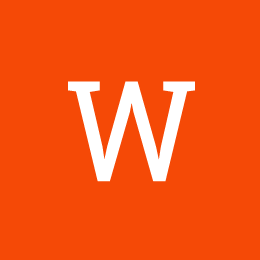
<style>
.page{position:relative;width:260px;height:260px;background:#f54906}
.page>*{position:absolute;margin:0}
.t1{font:140px "RobotoSlab-Regular";color:#ffffff}
</style>
<div class="page">
<p class="t1" style="left:68px;top:81px;width:127px;height:101px">W</p>
</div>
